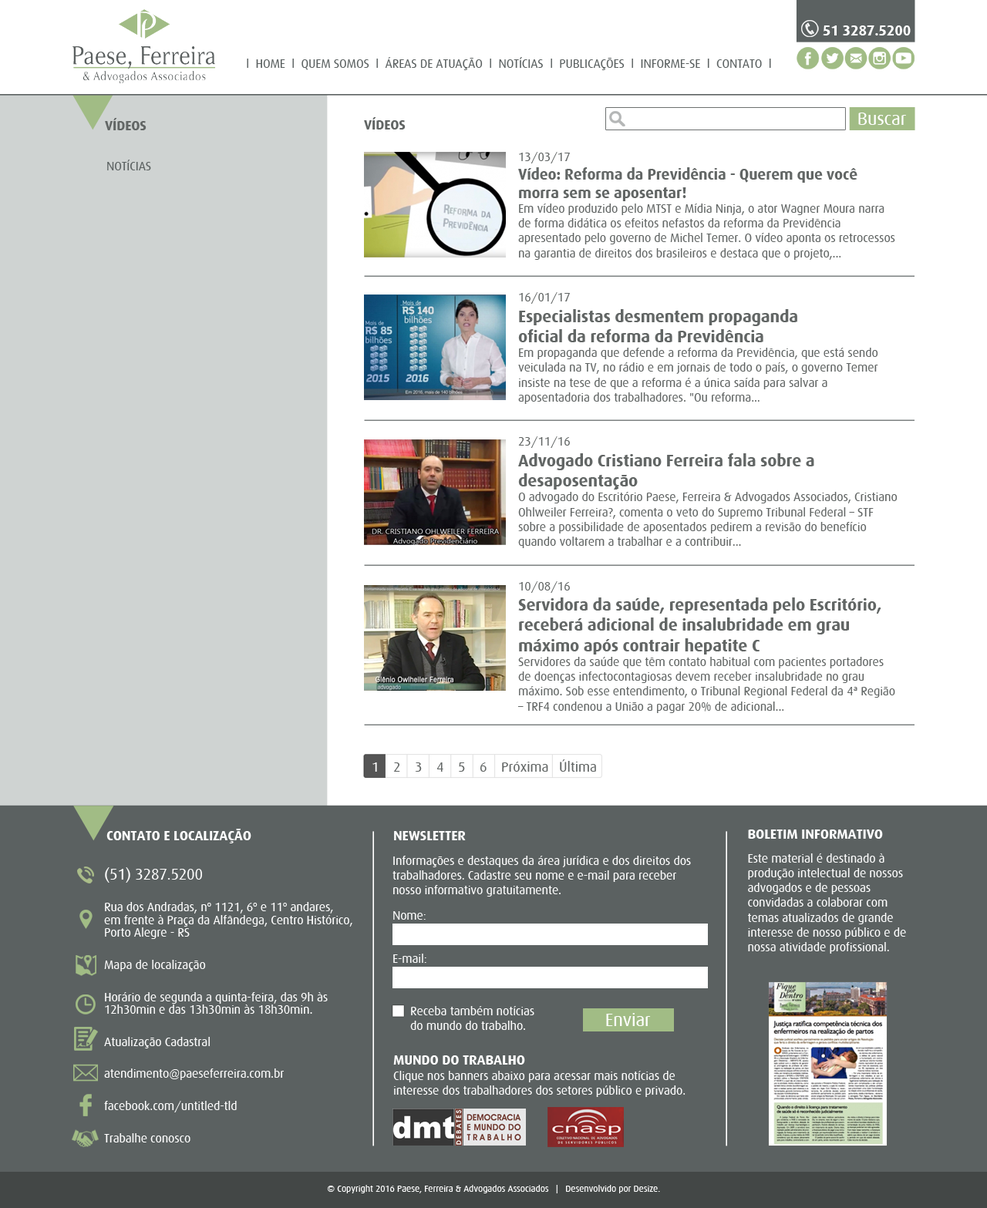
<style>
.page{position:relative;width:987px;height:1208px;background:#ffffff}
.page>*{position:absolute;margin:0}
.t1{font:14.5px "Dax-Bold";letter-spacing:-0.01em;color:#ffffff}
.t2{font:12.3px "Dax-Regular";letter-spacing:-0.01em;color:#5b6161}
.t3{font:11.4px "ArialMT";letter-spacing:-0.01em;color:#000000}
.t4{font:18.3px "Dax-Regular";letter-spacing:-0.01em;color:#ffffff}
.t5{font:13.9px "Dax-Bold";letter-spacing:-0.01em;color:#626665}
.t6{font:12.3px "Dax-Regular";letter-spacing:-0.01em;color:#626665}
.t7{font:15.4px "Dax-Bold";letter-spacing:-0.01em;color:#626665}
.t8{font:17px "Dax-Bold";letter-spacing:-0.01em;color:#626665}
.t9{font:13.9px "Dax-Bold";letter-spacing:-0.01em;color:#ffffff}
.t10{font:12.3px "Dax-Regular";letter-spacing:-0.01em;color:#ffffff}
.t11{font:12.3px/12.8px "Dax-Regular";letter-spacing:-0.01em;color:#ffffff}
.t12{font:15.4px/12.8px "Dax-Regular";letter-spacing:-0.01em;color:#ffffff}
.t13{font:9.3px "Dax-Regular";letter-spacing:-0.01em;color:#ffffff}
</style>
<div class="page">
<p class="t1" style="left:823px;top:25px;width:88px;height:10px">51 3287.5200</p>
<p class="t2" style="left:247px;top:57px;width:524px;height:13px"><span class="t3"><br></span>l  HOME  l  QUEM SOMOS  l  ÁREAS DE ATUAÇÃO  l  NOTÍCIAS  l  PUBLICAÇÕES  l  INFORME-SE  l  CONTATO  l</p>
<p class="t4" style="left:858px;top:113px;width:48px;height:12px">Buscar</p>
<p class="t5" style="left:105px;top:118px;width:41px;height:12px">VÍDEOS</p>
<p class="t6" style="left:364px;top:117px;width:533px;height:596px"><span class="t5">VÍDEOS<br><br></span>13/03/17<br><span class="t7">Vídeo: Reforma da Previdência - Querem que você morra sem se aposentar!<br></span>Em vídeo produzido pelo MTST e Mídia Ninja, o ator Wagner Moura narra de forma didática os efeitos nefastos da reforma da Previdência apresentado pelo governo de Michel Temer. O vídeo aponta os retrocessos na garantia de direitos dos brasileiros e destaca que o projeto,...<br><br><br>16/01/17<br><span class="t8">Especialistas desmentem propaganda <br>oficial da reforma da Previdência<br></span>Em propaganda que defende a reforma da Previdência, que está sendo veiculada na TV, no rádio e em jornais de todo o país, o governo Temer insiste na tese de que a reforma é a única saída para salvar a aposentadoria dos trabalhadores. "Ou reforma...<br><br><br>23/11/16<br><span class="t8">Advogado Cristiano Ferreira fala sobre a desaposentação<br></span>O advogado do Escritório Paese, Ferreira &amp; Advogados Associados, Cristiano Ohlweiler Ferreira?, comenta o veto do Supremo Tribunal Federal – STF sobre a possibilidade de aposentados pedirem a revisão do benefício quando voltarem a trabalhar e a contribuir...<br><br><br>10/08/16<br><span class="t8">Servidora da saúde, representada pelo Escritório, receberá adicional de insalubridade em grau máximo após contrair hepatite C<br></span>Servidores da saúde que têm contato habitual com pacientes portadores de doenças infectocontagiosas devem receber insalubridade no grau máximo. Sob esse entendimento, o Tribunal Regional Federal da 4ª Região – TRF4 condenou a União a pagar 20% de adicional...</p>
<p class="t2" style="left:107px;top:160px;width:44px;height:10px">NOTÍCIAS</p>
<p class="t9" style="left:106px;top:829px;width:145px;height:15px">CONTATO E LOCALIZAÇÃO</p>
<p class="t9" style="left:394px;top:831px;width:72px;height:9px">NEWSLETTER</p>
<p class="t10" style="left:748px;top:830px;width:158px;height:124px"><span class="t9">BOLETIM INFORMATIVO<br><br></span>Este material é destinado à produção intelectual de nossos advogados e de pessoas convidadas a colaborar com temas atualizados de grande interesse de nosso público e de nossa atividade profissional.</p>
<p class="t10" style="left:392px;top:856px;width:299px;height:41px">Informações e destaques da área jurídica e dos direitos dos trabalhadores. Cadastre seu nome e e-mail para receber nosso informativo gratuitamente.</p>
<p class="t11" style="left:104px;top:867px;width:248px;height:276px"><span class="t12">(51) 3287.5200<br><br></span>Rua dos Andradas, nº 1121, 6º e 11º andares, <br>em frente à Praça da Alfândega, Centro Histórico, Porto Alegre - RS<br><br>Mapa de localização<br><br>Horário de segunda a quinta-feira, das 9h às 12h30min e das 13h30min às 18h30min.<br><br>Atualização Cadastral<br><br>atendimento@paeseferreira.com.br<br><br>facebook.com/untitled-tld<br><br>Trabalhe conosco</p>
<p class="t10" style="left:393px;top:911px;width:33px;height:9px">Nome:</p>
<p class="t10" style="left:393px;top:954px;width:33px;height:9px">E-mail:</p>
<p class="t10" style="left:410px;top:1006px;width:124px;height:24px">Receba também notícias<br>do mundo do trabalho.</p>
<p class="t4" style="left:606px;top:1013px;width:45px;height:13px">Enviar</p>
<p class="t10" style="left:393px;top:1056px;width:292px;height:41px"><span class="t9">MUNDO DO TRABALHO <br></span>Clique nos banners abaixo para acessar mais notícias de <br>interesse dos trabalhadores dos setores público e privado.</p>
<p class="t13" style="left:327px;top:1185px;width:333px;height:9px">© Copyright 2016 Paese, Ferreira &amp; Advogados Associados   |   Desenvolvido por Desize.</p>
</div>
